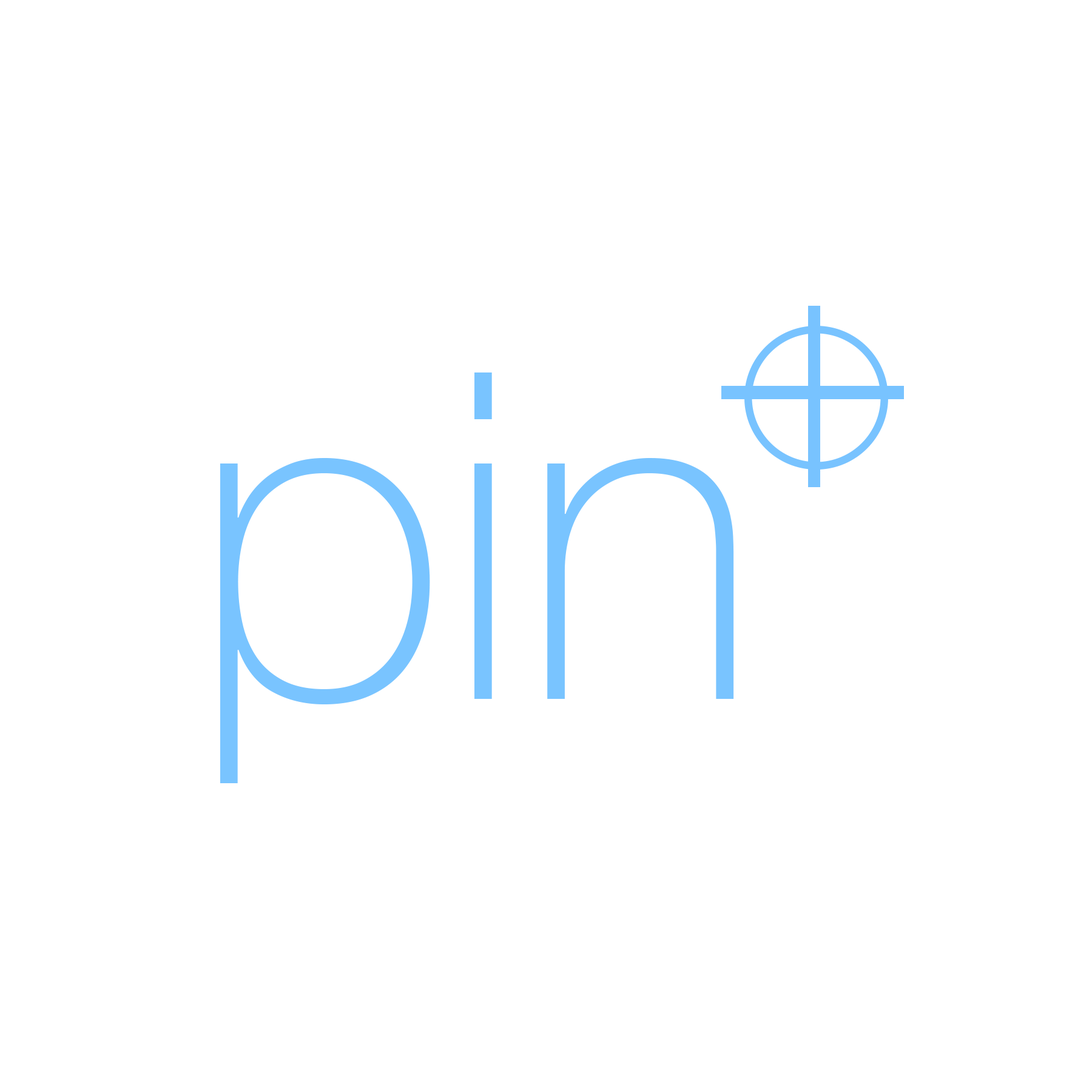
<style>
.page{position:relative;width:1092px;height:1092px;background:#ffffff}
.page>*{position:absolute;margin:0}
.t1{font:457.4px "HelveticaNeue-Thin";color:#79c4ff}
</style>
<div class="page">
<p class="t1" style="left:220px;top:372px;width:514px;height:411px">pin</p>
</div>
